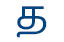
<style>
.page{position:relative;width:64px;height:42px;background:#ffffff}
.page>*{position:absolute;margin:0}
.t1{font:38.7px "NirmalaUI";color:#004481}
</style>
<div class="page">
<p class="t1" style="left:16px;top:6px;width:31px;height:32px">த</p>
</div>
